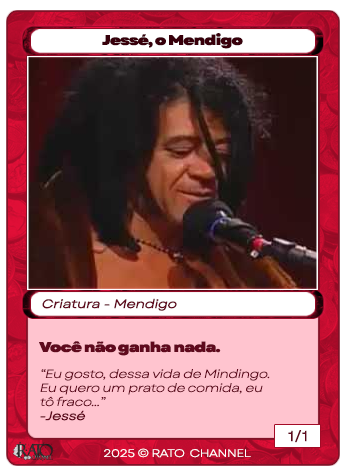
<style>
.page{position:relative;width:345px;height:475px}
.page>*{position:absolute;margin:0}
.t1{font:14px "Garet-Heavy";letter-spacing:-0.05em;color:#38000b;scale:1.2 1}
.t2{font:12px "Garet-Book";letter-spacing:-0.05em;color:#5f091d;font-weight:bold;font-style:italic;scale:1.2 1}
.t3{font:14px "Garet-Heavy";letter-spacing:-0.05em;color:#5f091d;scale:1.2 1}
.t4{font:12px/14px "Garet-Book";letter-spacing:-0.05em;color:#5f091d;font-style:italic;scale:1.2 1}
.t5{font:12px/14px "Garet-Book";letter-spacing:-0.05em;color:#5f091d;font-weight:bold;font-style:italic;scale:1.2 1}
.t6{font:14px "Garet-Book";letter-spacing:-0.05em;color:#5f091d;font-weight:bold;scale:1.2 1}
.t7{font:11px "Garet-Book";letter-spacing:-0.05em;color:#ffffff;scale:1.2 1}
</style>
<div class="page">
<p class="t1" style="left:102px;top:33px;width:141px;height:16px">Jessé, o Mendigo</p>
<p class="t2" style="left:42px;top:298px;width:135px;height:13px">Criatura - Mendigo</p>
<p class="t3" style="left:39px;top:341px;width:182px;height:15px">Você não ganha nada.</p>
<p class="t4" style="left:40px;top:369px;width:230px;height:52px">“Eu gosto, dessa vida de Mindingo.<br>Eu quero um prato de comida, eu<br>tô fraco...”<br><span class="t5">-Jessé</span></p>
<p class="t6" style="left:288px;top:430px;width:19px;height:13px">1/1</p>
<p class="t7" style="left:104px;top:448px;width:147px;height:10px">2025 © RATO  CHANNEL</p>
</div>
